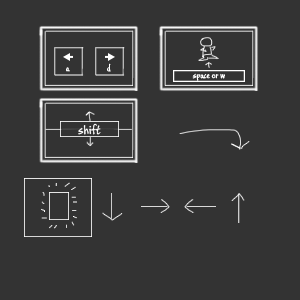
<style>
.page{position:relative;width:300px;height:300px;background:#333333}
.page>*{position:absolute;margin:0}
.t1{font:8.3px "BuxtonSketch";letter-spacing:0.005em;color:#ffffff}
.t2{font:12.5px "BuxtonSketch";letter-spacing:0.005em;color:#ffffff}
</style>
<div class="page">
<p class="t1" style="left:107px;top:63px;width:4px;height:9px">d</p>
<p class="t1" style="left:66px;top:67px;width:4px;height:5px">a</p>
<p class="t1" style="left:192px;top:73px;width:33px;height:8px">space or w</p>
<p class="t2" style="left:78px;top:123px;width:23px;height:12px">shift</p>
</div>
